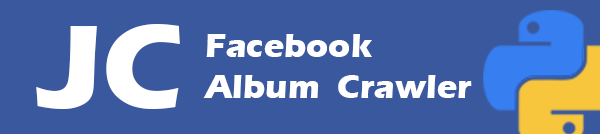
<style>
.page{position:relative;width:600px;height:134px;background:#3a589e}
.page>*{position:absolute;margin:0}
.t1{font:121.9px "ErasITC-Bold";color:#ffffff}
.t2{font:34.1px/13.6px "ErasITC-Bold";color:#ffffff}
</style>
<div class="page">
<p class="t1" style="left:36px;top:24px;width:144px;height:85px">JC</p>
<p class="t2" style="left:203px;top:34px;width:269px;height:64px">Facebook <br><br><br>Album  Crawler</p>
</div>
